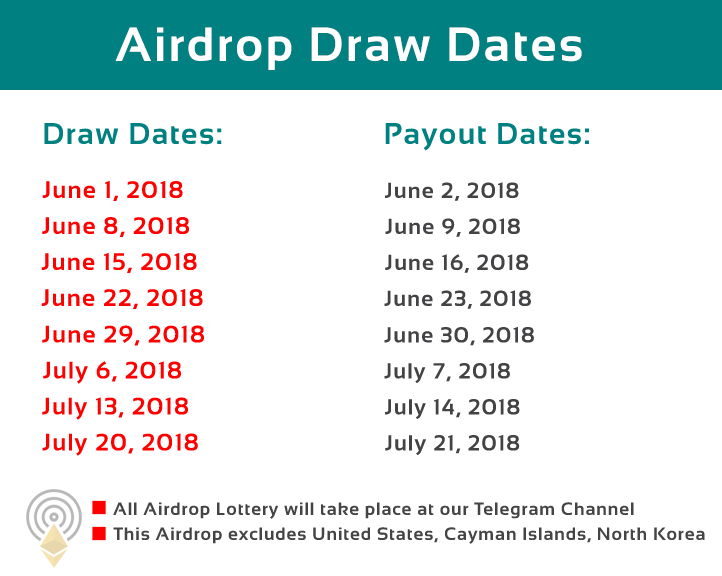
<style>
.page{position:relative;width:722px;height:576px;background:#ffffff}
.page>*{position:absolute;margin:0}
.t1{font:48px "Sansation-Bold";letter-spacing:0.05em;color:#ffffff}
.t2{font:30px "Sansation-Bold";letter-spacing:0.05em;color:#008080}
.t3{font:24px "Sansation-Bold";letter-spacing:0.05em;color:#ff0000}
.t4{font:22px "Sansation-Bold";letter-spacing:0.05em;color:#434244}
.t5{font:18px "Sansation-Bold";letter-spacing:0.05em;color:#444444}
</style>
<div class="page">
<p class="t1" style="left:115px;top:27px;width:467px;height:43px">Airdrop Draw Dates</p>
<p class="t2" style="left:44px;top:123px;width:178px;height:22px">Draw Dates:</p>
<p class="t2" style="left:385px;top:123px;width:204px;height:28px">Payout Dates:</p>
<p class="t3" style="left:42px;top:181px;width:141px;height:20px">June 1, 2018</p>
<p class="t4" style="left:385px;top:182px;width:134px;height:19px">June 2, 2018</p>
<p class="t3" style="left:42px;top:217px;width:147px;height:20px">June 8, 2018</p>
<p class="t4" style="left:385px;top:218px;width:135px;height:19px">June 9, 2018</p>
<p class="t3" style="left:41px;top:253px;width:156px;height:20px">June 15, 2018</p>
<p class="t4" style="left:385px;top:254px;width:144px;height:19px">June 16, 2018</p>
<p class="t3" style="left:41px;top:289px;width:162px;height:20px">June 22, 2018</p>
<p class="t4" style="left:384px;top:290px;width:147px;height:19px">June 23, 2018</p>
<p class="t3" style="left:42px;top:325px;width:162px;height:21px">June 29, 2018</p>
<p class="t4" style="left:384px;top:326px;width:150px;height:20px">June 30, 2018</p>
<p class="t3" style="left:43px;top:361px;width:138px;height:23px">July 6, 2018</p>
<p class="t4" style="left:384px;top:362px;width:126px;height:21px">July 7, 2018</p>
<p class="t3" style="left:42px;top:397px;width:146px;height:23px">July 13, 2018</p>
<p class="t4" style="left:385px;top:398px;width:135px;height:21px">July 14, 2018</p>
<p class="t3" style="left:42px;top:433px;width:156px;height:23px">July 20, 2018</p>
<p class="t4" style="left:385px;top:434px;width:135px;height:21px">July 21, 2018</p>
<p class="t5" style="left:113px;top:502px;width:521px;height:17px">All Airdrop Lottery will take place at our Telegram Channel</p>
<p class="t5" style="left:113px;top:527px;width:592px;height:17px">This Airdrop excludes United States, Cayman Islands, North Korea</p>
</div>
